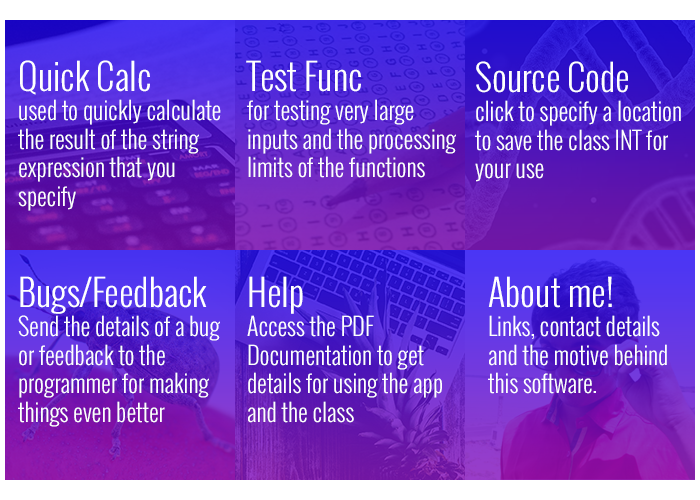
<style>
.page{position:relative;width:700px;height:500px}
.page>*{position:absolute;margin:0}
.t1{font:24px "Oswald-Light";color:#ffffff}
.t2{font:36px "Oswald-Light";color:#ffffff}
</style>
<div class="page">
<p class="t1" style="left:18px;top:60px;width:203px;height:151px"><span class="t2">Quick Calc<br></span>used to quickly calculate<br>the result of the string <br>expression that you <br>specify</p>
<p class="t1" style="left:246px;top:60px;width:210px;height:118px"><span class="t2">Test Func<br></span>for testing very large <br>inputs and the processing <br>limits of the functions</p>
<p class="t1" style="left:475px;top:61px;width:206px;height:121px"><span class="t2">Source Code<br></span>click to specify a location<br>to save the class INT for<br>your use</p>
<p class="t1" style="left:18px;top:276px;width:202px;height:151px"><span class="t2">Bugs/Feedback<br></span>Send the details of a bug <br>or feedback to the <br>programmer for making<br>things even better</p>
<p class="t1" style="left:247px;top:276px;width:195px;height:147px"><span class="t2">Help<br></span>Access the PDF<br>Documentation to get <br>details for using the app<br>and the class</p>
<p class="t1" style="left:488px;top:276px;width:179px;height:118px"><span class="t2">About me!<br></span>Links, contact details <br>and the motive behind <br>this software.</p>
</div>
